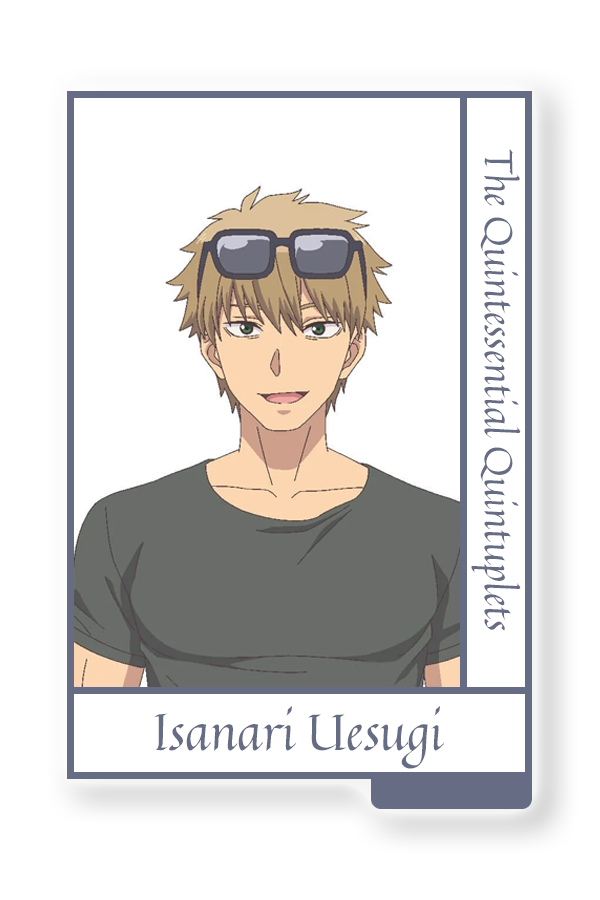
<style>
.page{position:relative;width:600px;height:900px;background:#ffffff}
.page>*{position:absolute;margin:0}
.t1{font:39px "Quintessential-Regular";color:#666c84}
.t2{font:50.5px "Quintessential-Regular";color:#666c84}
</style>
<div class="page">
<p class="t1" style="left:471px;top:149px;width:50px;height:482px;rotate:90deg">The Quintessential Quintuplets</p>
<p class="t2" style="left:154px;top:706px;width:290px;height:63px">Isanari Uesugi</p>
</div>
